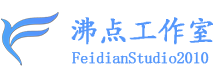
<style>
.page{position:relative;width:220px;height:80px;background:#ffffff}
.page>*{position:absolute;margin:0}
.t1{font:29.3px "¿¬Ìå";color:#5597fb;text-transform:uppercase;font-weight:bold}
.t2{font:16px "·ÂËÎ";color:#5597fb;font-weight:bold}
</style>
<div class="page">
<p class="t1" style="left:71px;top:17px;width:142px;height:28px">沸点工作室</p>
<p class="t2" style="left:72px;top:52px;width:137px;height:12px">FeidianStudio2010</p>
</div>
